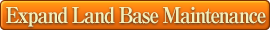
<style>
.page{position:relative;width:270px;height:30px}
.page>*{position:absolute;margin:0}
.t1{font:22px "RyuminPro-ExBold";letter-spacing:-0.08em;color:#f7efb7;scale:0.9 1}
</style>
<div class="page">
<p class="t1" style="left:6px;top:6px;width:260px;height:21px">Expand Land Base Maintenance</p>
</div>
